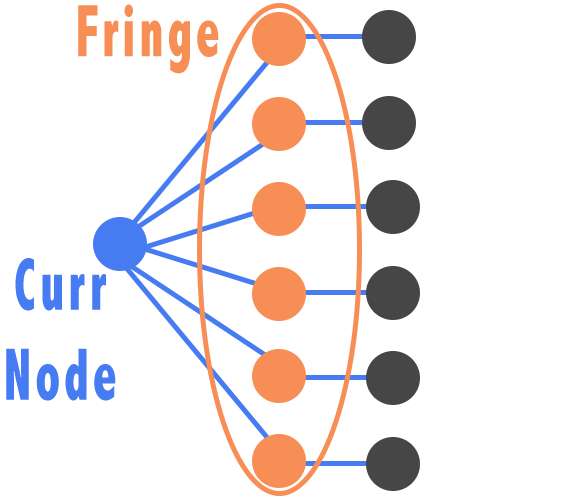
<style>
.page{position:relative;width:572px;height:500px;background:#ffffff}
.page>*{position:absolute;margin:0}
.t1{font:75px "AbadiMT-CondensedExtraBold";letter-spacing:0.075em;color:#f68e56;scale:0.68 1}
.t2{font:75px "AbadiMT-CondensedExtraBold";letter-spacing:0.075em;color:#477bf2;scale:0.68 1}
</style>
<div class="page">
<p class="t1" style="left:78px;top:4px;width:141px;height:70px">Fringe</p>
<p class="t2" style="left:6px;top:258px;width:110px;height:143px;text-align:center">Curr<br>Node</p>
</div>
